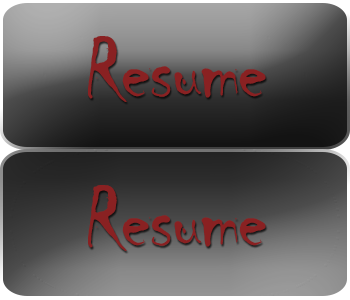
<style>
.page{position:relative;width:350px;height:300px}
.page>*{position:absolute;margin:0}
.t1{font:89.9px "Chiller-Regular";letter-spacing:-0.025em;color:#892122}
</style>
<div class="page">
<p class="t1" style="left:88px;top:36px;width:178px;height:66px">Resume</p>
<p class="t1" style="left:88px;top:185px;width:178px;height:66px">Resume</p>
</div>
